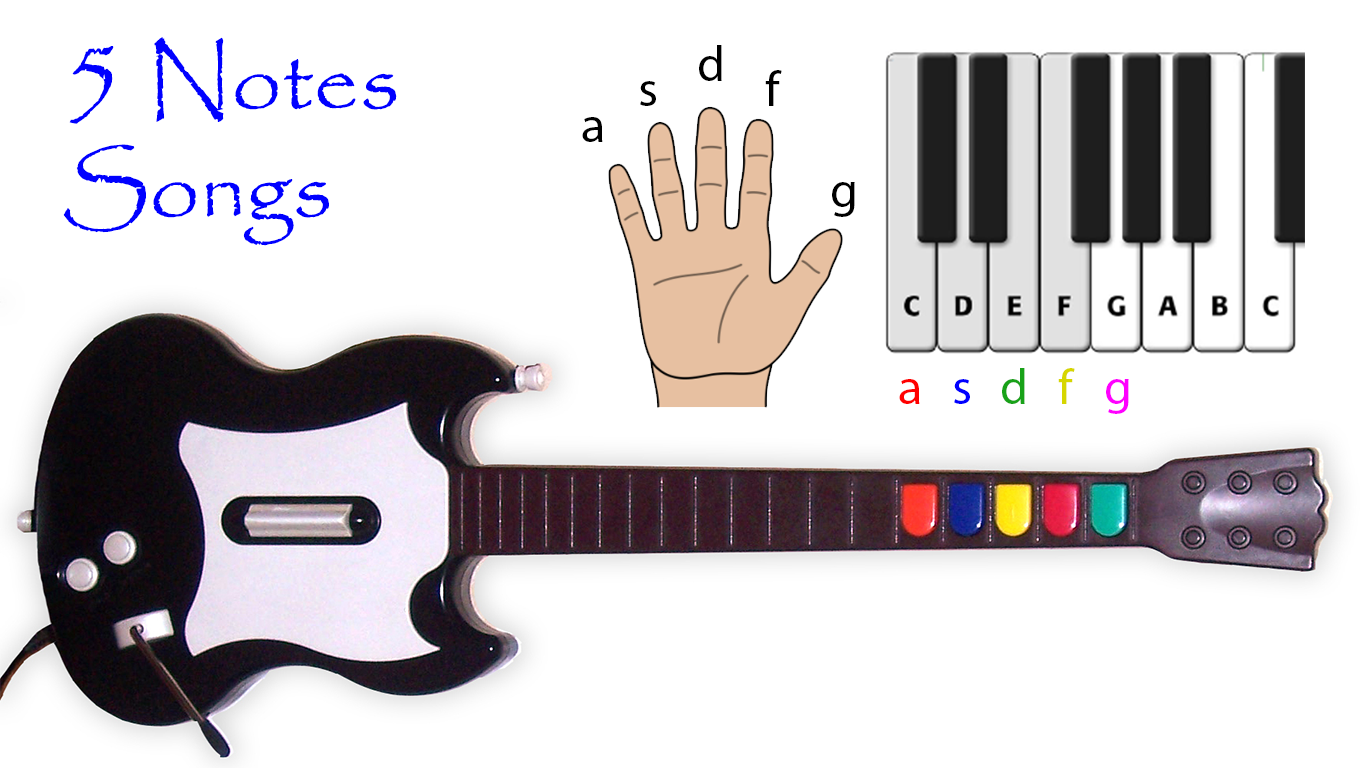
<style>
.page{position:relative;width:1366px;height:768px;background:#ffffff}
.page>*{position:absolute;margin:0}
.t1{font:90px "Papyrus-Regular";color:#0000ff}
.t2{font:110px "Papyrus-Regular";color:#0000ff}
.t3{font:50px "MyriadPro-Regular";color:#000000}
.t4{font:50px "MyriadPro-Regular";color:#18a218}
.t5{font:50px "MyriadPro-Regular";color:#d6d600}
.t6{font:50px "MyriadPro-Regular";color:#ff0000}
.t7{font:50px "MyriadPro-Regular";color:#0000ff}
.t8{font:50px "MyriadPro-Regular";color:#ff00ff}
</style>
<div class="page">
<p class="t1" style="left:63px;top:37px;width:334px;height:209px"><span class="t2">5 </span>Notes <br>Songs</p>
<p class="t3" style="left:699px;top:45px;width:23px;height:36px">d</p>
<p class="t3" style="left:765px;top:70px;width:17px;height:36px">f</p>
<p class="t3" style="left:640px;top:81px;width:16px;height:25px">s</p>
<p class="t3" style="left:582px;top:117px;width:21px;height:25px">a</p>
<p class="t3" style="left:832px;top:182px;width:23px;height:35px">g</p>
<p class="t4" style="left:1002px;top:368px;width:23px;height:36px">d</p>
<p class="t5" style="left:1058px;top:368px;width:17px;height:36px">f</p>
<p class="t6" style="left:899px;top:379px;width:21px;height:25px">a</p>
<p class="t7" style="left:954px;top:379px;width:16px;height:25px">s</p>
<p class="t8" style="left:1106px;top:379px;width:23px;height:35px">g</p>
</div>
